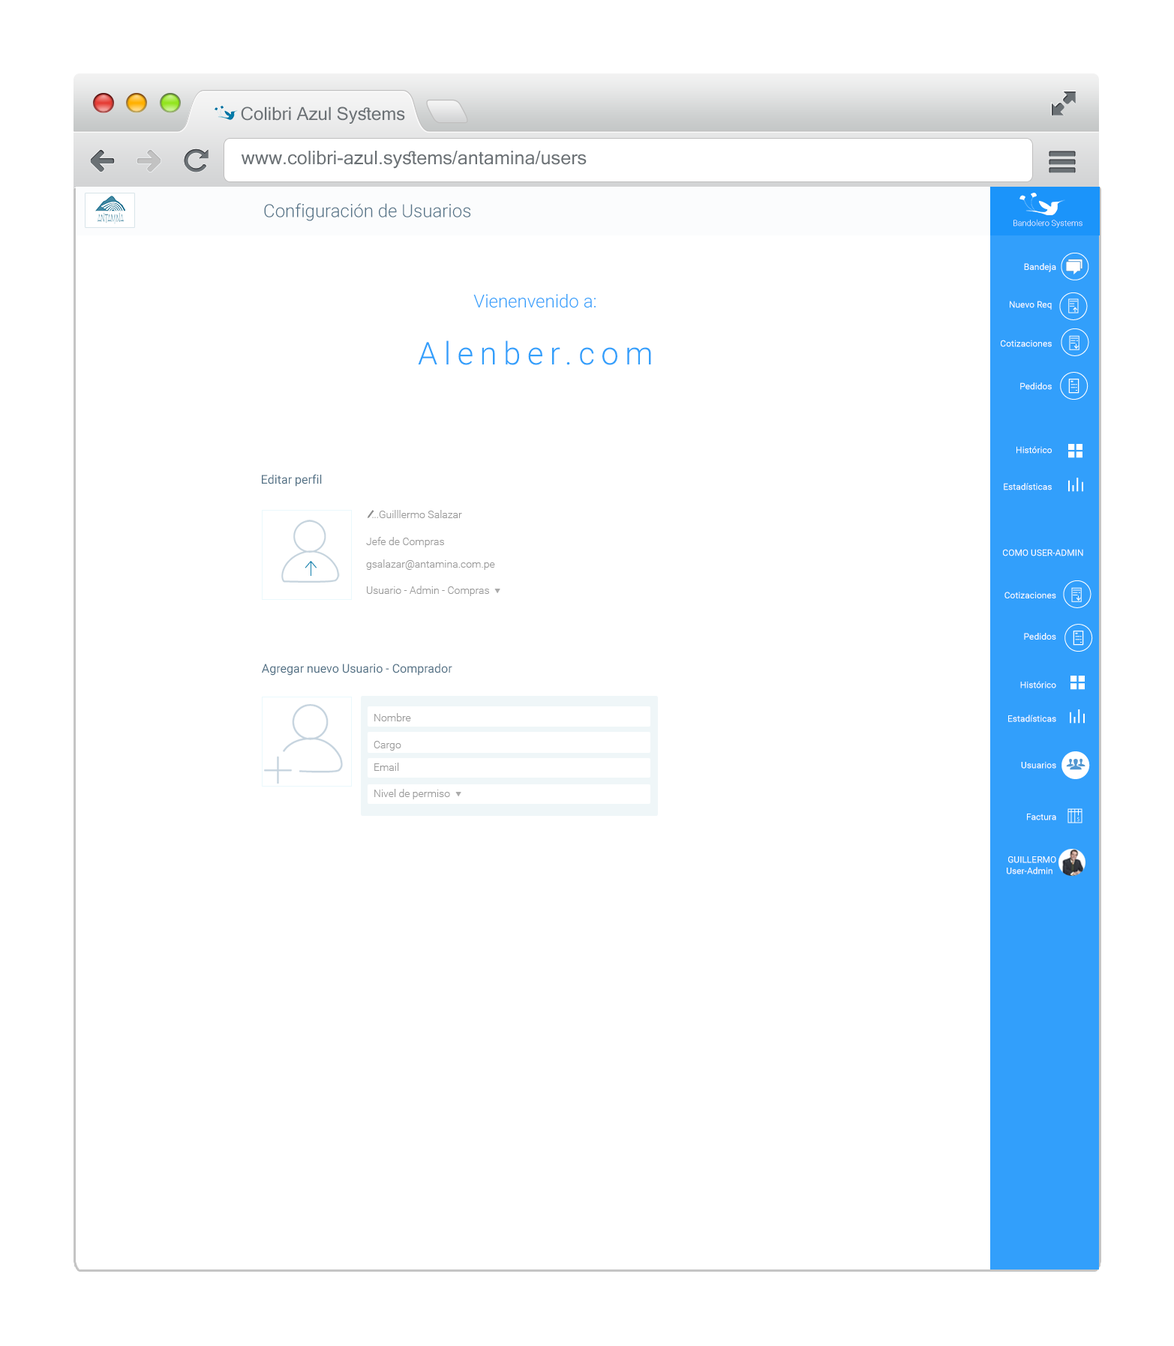
<style>
.page{position:relative;width:1174px;height:1346px;background:#ffffff}
.page>*{position:absolute;margin:0}
.t1{font:18px "MicrosoftSansSerif";color:#6b7175}
.t2{font:18.9px "MicrosoftSansSerif";color:#6b7175}
.t3{font:18px "Roboto-Light";color:#557387}
.t4{font:8.2px "Roboto-Light";color:#ffffff}
.t5{font:9px "Roboto-Regular";color:#ffffff}
.t6{font:18px "Roboto-Light";color:#329ffb}
.t7{font:31.5px "Roboto-Light";letter-spacing:0.2em;color:#329ffb}
.t8{font:12px "Roboto-Regular";color:#557387}
.t9{font:10.5px "Roboto-Light";color:#999999}
</style>
<div class="page">
<p class="t1" style="left:241px;top:106px;width:164px;height:18px">Colibri Azul Systems</p>
<p class="t2" style="left:241px;top:151px;width:345px;height:18px">www.colibri-azul.systems/antamina/users</p>
<p class="t3" style="left:264px;top:203px;width:207px;height:18px">Configuración de Usuarios</p>
<p class="t4" style="left:1013px;top:219px;width:69px;height:9px">Bandolero Systems</p>
<p class="t5" style="left:1024px;top:263px;width:32px;height:9px">Bandeja</p>
<p class="t6" style="left:473px;top:294px;width:123px;height:14px">Vienenvenido a:</p>
<p class="t5" style="left:1010px;top:301px;width:42px;height:9px">Nuevo Req</p>
<p class="t7" style="left:418px;top:340px;width:233px;height:25px">Alenber.com</p>
<p class="t5" style="left:1000px;top:340px;width:52px;height:7px">Cotizaciones</p>
<p class="t5" style="left:1020px;top:382px;width:32px;height:8px">Pedidos</p>
<p class="t5" style="left:1016px;top:446px;width:36px;height:8px">Histórico</p>
<p class="t8" style="left:262px;top:474px;width:60px;height:13px">Editar perfil</p>
<p class="t5" style="left:1004px;top:483px;width:48px;height:7px">Estadísticas</p>
<p class="t9" style="left:379px;top:510px;width:83px;height:8px">Guilllermo Salazar</p>
<p class="t9" style="left:366px;top:537px;width:78px;height:11px">Jefe de Compras</p>
<p class="t5" style="left:1003px;top:549px;width:80px;height:7px">COMO USER-ADMIN</p>
<p class="t9" style="left:366px;top:560px;width:129px;height:10px">gsalazar@antamina.com.pe</p>
<p class="t9" style="left:367px;top:586px;width:122px;height:10px">Usuario - Admin - Compras</p>
<p class="t5" style="left:1004px;top:592px;width:52px;height:6px">Cotizaciones</p>
<p class="t5" style="left:1024px;top:633px;width:32px;height:7px">Pedidos</p>
<p class="t8" style="left:262px;top:664px;width:190px;height:12px">Agregar nuevo Usuario - Comprador</p>
<p class="t5" style="left:1020px;top:681px;width:36px;height:7px">Histórico</p>
<p class="t9" style="left:374px;top:713px;width:37px;height:9px">Nombre</p>
<p class="t5" style="left:1008px;top:715px;width:48px;height:7px">Estadísticas</p>
<p class="t9" style="left:374px;top:741px;width:27px;height:10px">Cargo</p>
<p class="t9" style="left:374px;top:763px;width:25px;height:8px">Email</p>
<p class="t5" style="left:1021px;top:762px;width:35px;height:7px">Usuarios</p>
<p class="t9" style="left:374px;top:789px;width:76px;height:11px">Nivel de permiso</p>
<p class="t5" style="left:1027px;top:814px;width:29px;height:6px">Factura</p>
<p class="t5" style="left:1008px;top:856px;width:48px;height:7px">GUILLERMO</p>
<p class="t5" style="left:1006px;top:867px;width:46px;height:7px">User-Admin</p>
</div>
